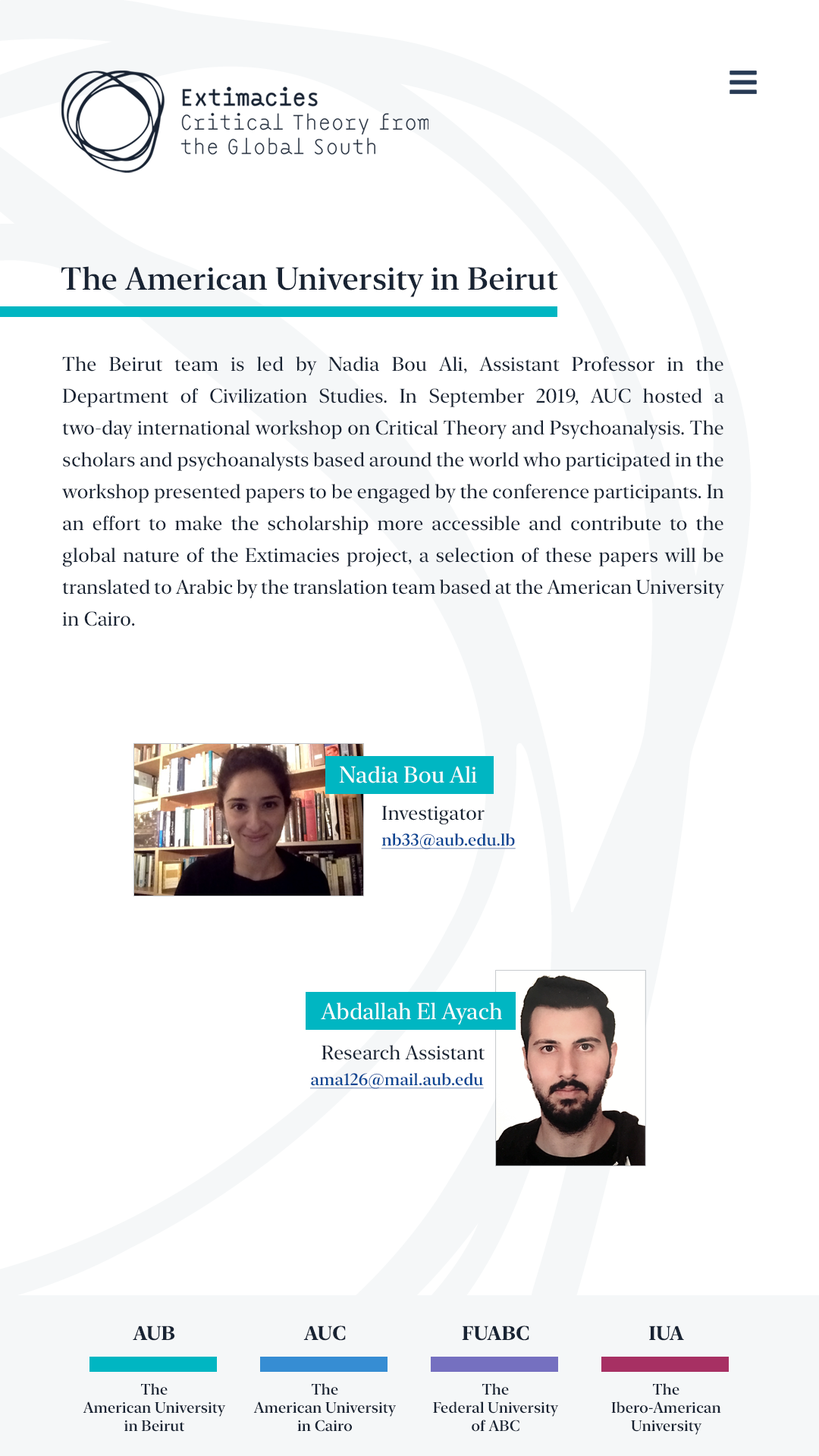
<style>
.page{position:relative;width:819px;height:1456px;background:#ffffff}
.page>*{position:absolute;margin:0}
.t1{font:31.8px "NewYorkLarge-Medium";color:#182333}
.t2{font:19.7px/31.8px "NewYorkLarge-Regular";color:#182333}
.t3{font:22.7px "NewYorkLarge-Regular";color:#ffffff}
.t4{font:19.7px "NewYorkLarge-Regular";color:#182333}
.t5{font:16.7px "NewYorkLarge-Medium";color:#0b4693;text-decoration:underline}
.t6{font:19.7px "NewYorkLarge-Bold";color:#182333}
.t7{font:15.2px "NewYorkLarge-Medium";color:#182333}
</style>
<div class="page">
<p class="t1" style="left:61px;top:266px;width:497px;height:31px">The American University in Beirut</p>
<p class="t2" style="left:62px;top:356px;width:662px;height:270px;text-align:justify">The Beirut team is led by Nadia Bou Ali, Assistant Professor in the Department of Civilization Studies. In September 2019, AUC hosted a two-day international workshop on Critical Theory and Psychoanalysis. The scholars and psychoanalysts based around the world who participated in the workshop presented papers to be engaged by the conference participants. In an effort to make the scholarship more accessible and contribute to the global nature of the Extimacies project, a selection of these papers will be translated to Arabic by the translation team based at the American University in Cairo.</p>
<p class="t3" style="left:339px;top:766px;width:138px;height:17px">Nadia Bou Ali</p>
<p class="t4" style="left:381px;top:805px;width:104px;height:20px">Investigator</p>
<p class="t5" style="left:381px;top:833px;width:135px;height:16px">nb33@aub.edu.lb</p>
<p class="t3" style="left:321px;top:1003px;width:181px;height:21px">Abdallah El Ayach</p>
<p class="t4" style="left:322px;top:1045px;width:163px;height:15px">Research Assistant</p>
<p class="t5" style="left:310px;top:1073px;width:174px;height:16px">ama126@mail.aub.edu</p>
<p class="t6" style="left:133px;top:1326px;width:42px;height:15px">AUB</p>
<p class="t6" style="left:303px;top:1326px;width:43px;height:15px">AUC</p>
<p class="t6" style="left:462px;top:1326px;width:67px;height:15px">FUABC</p>
<p class="t6" style="left:649px;top:1326px;width:35px;height:15px">IUA</p>
<p class="t7" style="left:83px;top:1383px;width:142px;height:49px;text-align:center">The<br>American University<br>in Beirut</p>
<p class="t7" style="left:253px;top:1383px;width:143px;height:49px;text-align:center">The<br>American University<br>in Cairo</p>
<p class="t7" style="left:433px;top:1383px;width:125px;height:49px;text-align:center">The<br>Federal University<br>of ABC</p>
<p class="t7" style="left:611px;top:1383px;width:110px;height:52px;text-align:center">The<br>Ibero-American<br>University</p>
</div>
